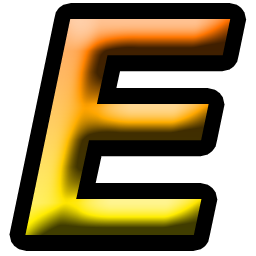
<style>
.page{position:relative;width:256px;height:256px;background:#ffffff}
.page>*{position:absolute;margin:0}
.t1{font:300.8px "Arial-BoldItalicMT"}
</style>
<div class="page">
<p class="t1" style="left:25px;top:19px;width:206px;height:216px">E</p>
</div>
